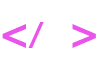
<style>
.page{position:relative;width:99px;height:74px;background:#ffffff}
.page>*{position:absolute;margin:0}
.t1{font:42.9px "BernardMT-Condensed";color:#eb54eb}
.t2{font:31.6px "BernardMT-Condensed";color:#eb54eb}
</style>
<div class="page">
<p class="t1" style="left:2px;top:24px;width:24px;height:24px">&lt;</p>
<p class="t2" style="left:28px;top:22px;width:16px;height:26px">/</p>
<p class="t1" style="left:72px;top:24px;width:24px;height:24px;rotate:180deg">&lt;</p>
</div>
